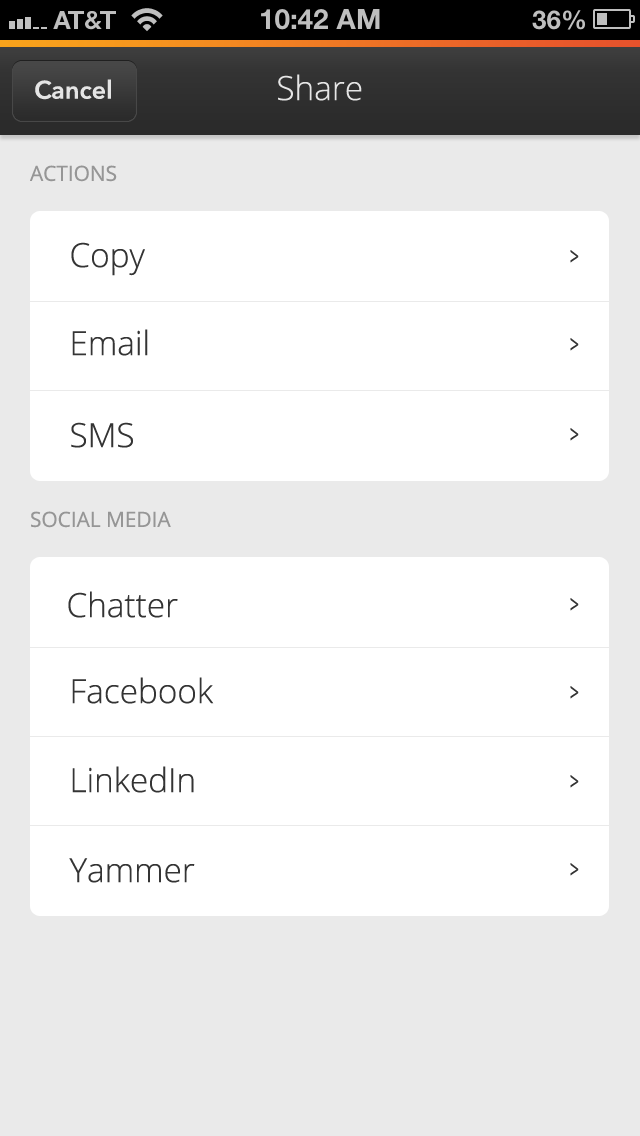
<style>
.page{position:relative;width:640px;height:1136px;background:#ffffff}
.page>*{position:absolute;margin:0}
.t1{font:33.3px "OpenSans-Light";color:#e5e5e5}
.t2{font:25px "AvenirNext-DemiBold";color:#e5e5e5}
.t3{font:20.8px "OpenSans";color:#969696}
.t4{font:33.3px "OpenSans-Light";color:#343434}
.t5{font:25px "OpenSans";color:#343434;scale:0.64 1}
</style>
<div class="page">
<p class="t1" style="left:278px;top:74px;width:84px;height:27px">Share</p>
<p class="t2" style="left:35px;top:79px;width:76px;height:21px">Cancel</p>
<p class="t3" style="left:30px;top:165px;width:87px;height:17px">ACTIONS</p>
<p class="t4" style="left:71px;top:242px;width:74px;height:34px">Copy</p>
<p class="t5" style="left:570px;top:250px;width:9px;height:13px">&gt;</p>
<p class="t4" style="left:72px;top:329px;width:76px;height:27px">Email</p>
<p class="t5" style="left:570px;top:338px;width:9px;height:13px">&gt;</p>
<p class="t4" style="left:71px;top:422px;width:62px;height:26px">SMS</p>
<p class="t5" style="left:570px;top:428px;width:9px;height:13px">&gt;</p>
<p class="t3" style="left:31px;top:511px;width:140px;height:17px">SOCIAL MEDIA</p>
<p class="t4" style="left:68px;top:591px;width:110px;height:27px">Chatter</p>
<p class="t5" style="left:570px;top:598px;width:9px;height:13px">&gt;</p>
<p class="t4" style="left:72px;top:677px;width:142px;height:27px">Facebook</p>
<p class="t5" style="left:570px;top:686px;width:9px;height:13px">&gt;</p>
<p class="t4" style="left:72px;top:766px;width:122px;height:27px">LinkedIn</p>
<p class="t5" style="left:570px;top:775px;width:9px;height:13px">&gt;</p>
<p class="t4" style="left:69px;top:858px;width:126px;height:25px">Yammer</p>
<p class="t5" style="left:570px;top:863px;width:9px;height:13px">&gt;</p>
</div>
